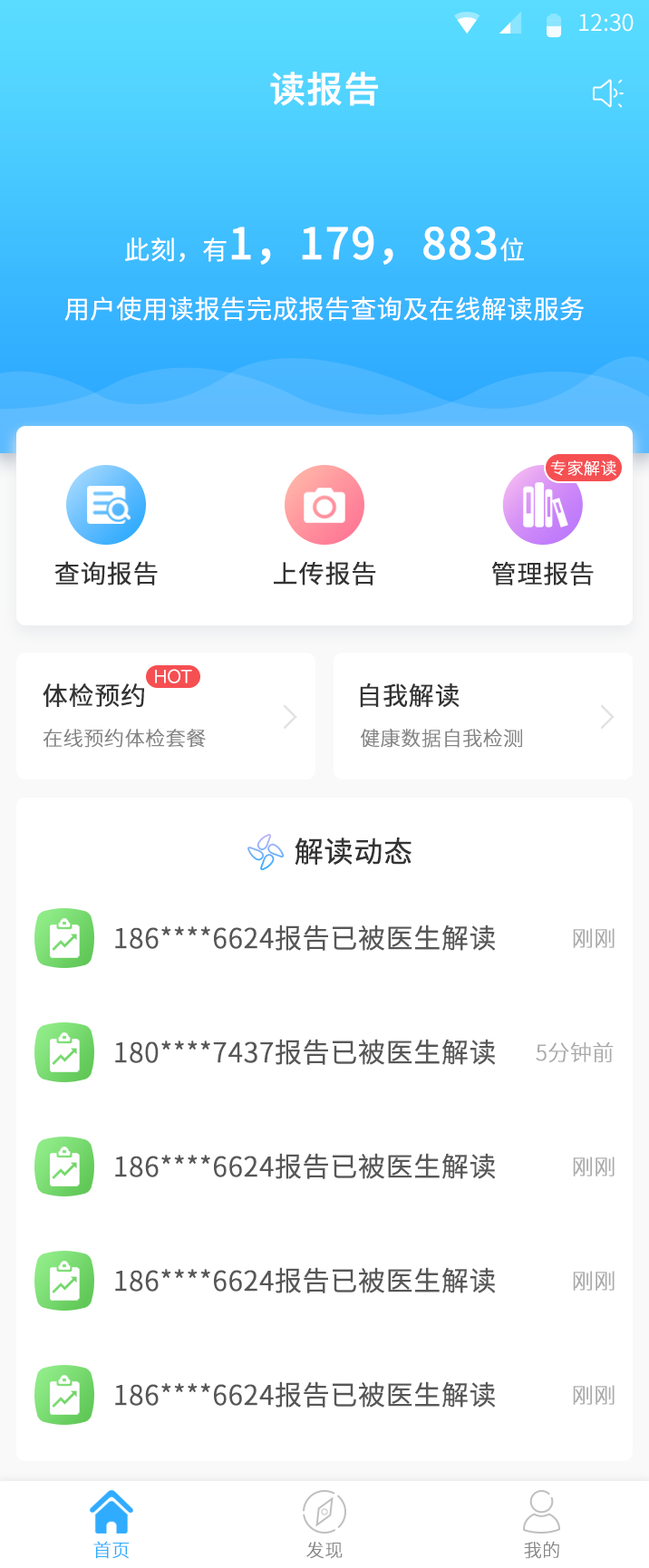
<style>
.page{position:relative;width:649px;height:1568px;background:#ffffff}
.page>*{position:absolute;margin:0}
.t1{font:23px "SourceHanSansCN-Normal";color:#ffffff}
.t2{font:36.3px "SourceHanSansCN-Medium";color:#ffffff;font-weight:bold}
.t3{font:43.5px "SourceHanSansCN-Medium";color:#ffffff;font-weight:bold}
.t4{font:25.4px "SourceHanSansCN-Normal";color:#ffffff;font-weight:bold}
.t5{font:16.3px "SourceHanSansCN-Light";color:#ffffff;font-weight:bold}
.t6{font:25.4px "SourceHanSansCN-Regular";color:#333333;font-weight:bold}
.t7{font:18.1px "HelveticaNeue-Light";color:#ffffff;font-weight:bold}
.t8{font:19.9px "SourceHanSansCN-Light";color:#858585;font-weight:bold}
.t9{font:29px "SourceHanSansCN-Regular";color:#333333;font-weight:bold}
.t10{font:27.2px "SourceHanSansCN-Normal";color:#575757;font-weight:bold}
.t11{font:21.8px "SourceHanSansCN-Light";color:#ababab;font-weight:bold}
.t12{font:18.1px "SourceHanSansCN-Light";color:#30acff;font-weight:bold}
.t13{font:18.1px "SourceHanSansCN-Light";color:#858585;font-weight:bold}
</style>
<div class="page">
<p class="t1" style="left:579px;top:14px;width:55px;height:18px">12:30</p>
<p class="t2" style="left:270px;top:72px;width:108px;height:34px">读报告</p>
<p class="t3" style="left:125px;top:226px;width:399px;height:39px"><span class="t4">此刻，有</span>1，179，883<span class="t4">位</span></p>
<p class="t4" style="left:64px;top:296px;width:520px;height:25px">用户使用读报告完成报告查询及在线解读服务</p>
<p class="t5" style="left:550px;top:460px;width:66px;height:16px">专家解读</p>
<p class="t6" style="left:54px;top:561px;width:104px;height:25px">查询报告</p>
<p class="t6" style="left:274px;top:561px;width:102px;height:25px">上传报告</p>
<p class="t6" style="left:491px;top:561px;width:103px;height:25px">管理报告</p>
<p class="t7" style="left:155px;top:669px;width:37px;height:14px">HOT</p>
<p class="t6" style="left:43px;top:683px;width:101px;height:24px">体检预约</p>
<p class="t6" style="left:360px;top:682px;width:100px;height:26px">自我解读</p>
<p class="t8" style="left:43px;top:729px;width:163px;height:19px">在线预约体检套餐</p>
<p class="t8" style="left:361px;top:729px;width:161px;height:19px">健康数据自我检测</p>
<p class="t9" style="left:295px;top:837px;width:116px;height:29px">解读动态</p>
<p class="t10" style="left:115px;top:924px;width:381px;height:27px">186****6624报告已被医生解读</p>
<p class="t11" style="left:573px;top:928px;width:42px;height:20px">刚刚</p>
<p class="t10" style="left:115px;top:1039px;width:381px;height:26px">180****7437报告已被医生解读</p>
<p class="t11" style="left:536px;top:1042px;width:78px;height:21px">5分钟前</p>
<p class="t10" style="left:115px;top:1153px;width:381px;height:26px">186****6624报告已被医生解读</p>
<p class="t11" style="left:573px;top:1157px;width:42px;height:19px">刚刚</p>
<p class="t10" style="left:115px;top:1267px;width:381px;height:26px">186****6624报告已被医生解读</p>
<p class="t11" style="left:573px;top:1271px;width:42px;height:20px">刚刚</p>
<p class="t10" style="left:115px;top:1381px;width:381px;height:27px">186****6624报告已被医生解读</p>
<p class="t11" style="left:573px;top:1385px;width:42px;height:20px">刚刚</p>
<p class="t12" style="left:93px;top:1541px;width:37px;height:18px">首页</p>
<p class="t13" style="left:306px;top:1542px;width:37px;height:17px">发现</p>
<p class="t13" style="left:524px;top:1541px;width:35px;height:18px">我的</p>
</div>
